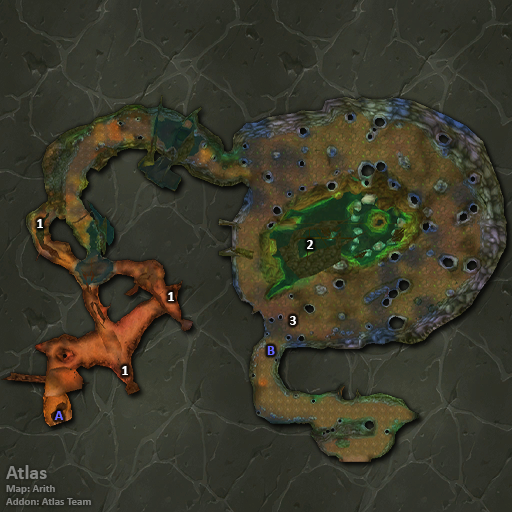
<style>
.page{position:relative;width:512px;height:512px}
.page>*{position:absolute;margin:0}
.t1{font:14px "Calibri-Bold";color:#ffffff}
.t2{font:14px "Calibri-Bold";color:#6666ff}
.t3{font:11px "Calibri-Bold";color:#838481}
.t4{font:20px "Calibri-Bold";color:#838481}
</style>
<div class="page">
<p class="t1" style="left:37px;top:219px;width:6px;height:9px">1</p>
<p class="t1" style="left:307px;top:240px;width:7px;height:9px">2</p>
<p class="t1" style="left:168px;top:292px;width:6px;height:9px">1</p>
<p class="t1" style="left:290px;top:316px;width:6px;height:9px">3</p>
<p class="t2" style="left:267px;top:346px;width:8px;height:9px">B</p>
<p class="t1" style="left:122px;top:366px;width:6px;height:9px">1</p>
<p class="t2" style="left:54px;top:411px;width:9px;height:9px">A</p>
<p class="t3" style="left:6px;top:465px;width:85px;height:40px"><span class="t4">Atlas<br></span>Map: Arith<br>Addon: Atlas Team</p>
</div>
